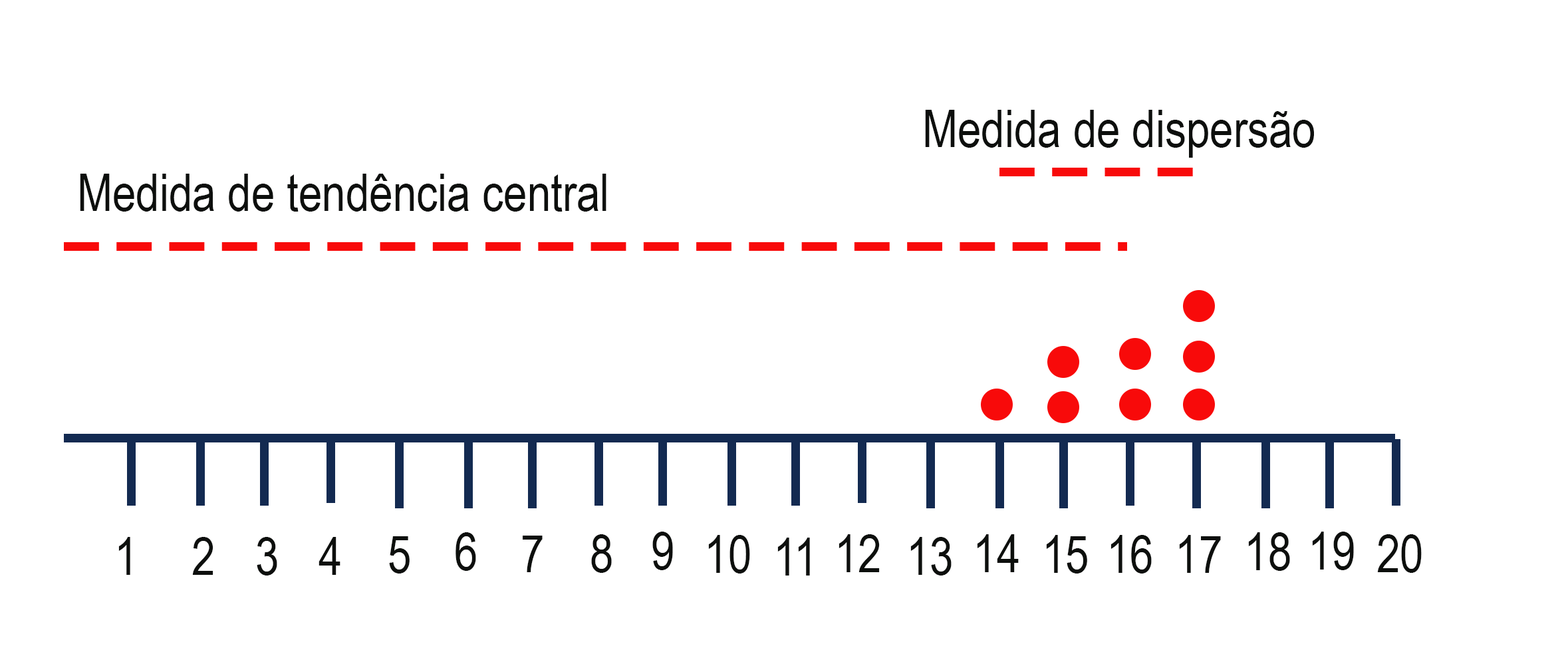
<style>
.page{position:relative;width:1568px;height:664px;background:#ffffff}
.page>*{position:absolute;margin:0}
.t1{font:88.7px "ArialNarrow";color:#0d0f0d}
</style>
<div class="page">
<p class="t1" style="left:925px;top:110px;width:389px;height:48px">Medida de dispersão</p>
<p class="t1" style="left:80px;top:174px;width:526px;height:37px">Medida de tendência central</p>
<p class="t1" style="left:456px;top:532px;width:20px;height:39px">6</p>
<p class="t1" style="left:591px;top:534px;width:21px;height:39px">8</p>
<p class="t1" style="left:652px;top:531px;width:21px;height:39px">9</p>
<p class="t1" style="left:839px;top:534px;width:41px;height:38px">12</p>
<p class="t1" style="left:977px;top:534px;width:42px;height:38px">14</p>
<p class="t1" style="left:1248px;top:532px;width:42px;height:39px">18</p>
<p class="t1" style="left:1312px;top:531px;width:42px;height:39px">19</p>
<p class="t1" style="left:1377px;top:534px;width:45px;height:39px">20</p>
<p class="t1" style="left:118px;top:537px;width:12px;height:38px">1</p>
<p class="t1" style="left:192px;top:537px;width:21px;height:38px">2</p>
<p class="t1" style="left:257px;top:537px;width:20px;height:38px">3</p>
<p class="t1" style="left:319px;top:537px;width:21px;height:38px">4</p>
<p class="t1" style="left:389px;top:536px;width:21px;height:37px">5</p>
<p class="t1" style="left:523px;top:535px;width:20px;height:37px">7</p>
<p class="t1" style="left:708px;top:535px;width:42px;height:38px">10</p>
<p class="t1" style="left:777px;top:537px;width:33px;height:38px">11</p>
<p class="t1" style="left:910px;top:537px;width:42px;height:38px">13</p>
<p class="t1" style="left:1046px;top:535px;width:41px;height:38px">15</p>
<p class="t1" style="left:1111px;top:535px;width:41px;height:38px">16</p>
<p class="t1" style="left:1179px;top:535px;width:42px;height:38px">17</p>
</div>
